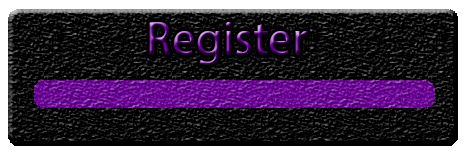
<style>
.page{position:relative;width:470px;height:160px;background:#000000}
.page>*{position:absolute;margin:0}
.t1{font:48px "MyriadPro-Regular"}
</style>
<div class="page">
<p class="t1" style="left:149px;top:22px;width:159px;height:43px">Register</p>
</div>
